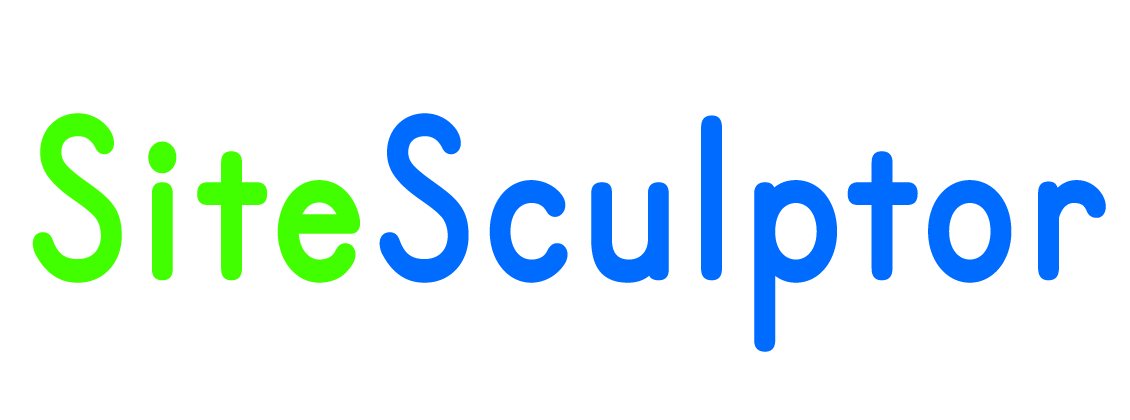
<style>
.page{position:relative;width:1130px;height:420px;background:#ffffff}
.page>*{position:absolute;margin:0}
.t1{font:243.8px "PrimerPrint-Bold";color:#006cff}
.t2{font:243.8px "PrimerPrint-Bold";color:#42ff00}
</style>
<div class="page">
<p class="t1" style="left:32px;top:113px;width:1074px;height:239px"><span class="t2">Site</span>Sculptor</p>
</div>
